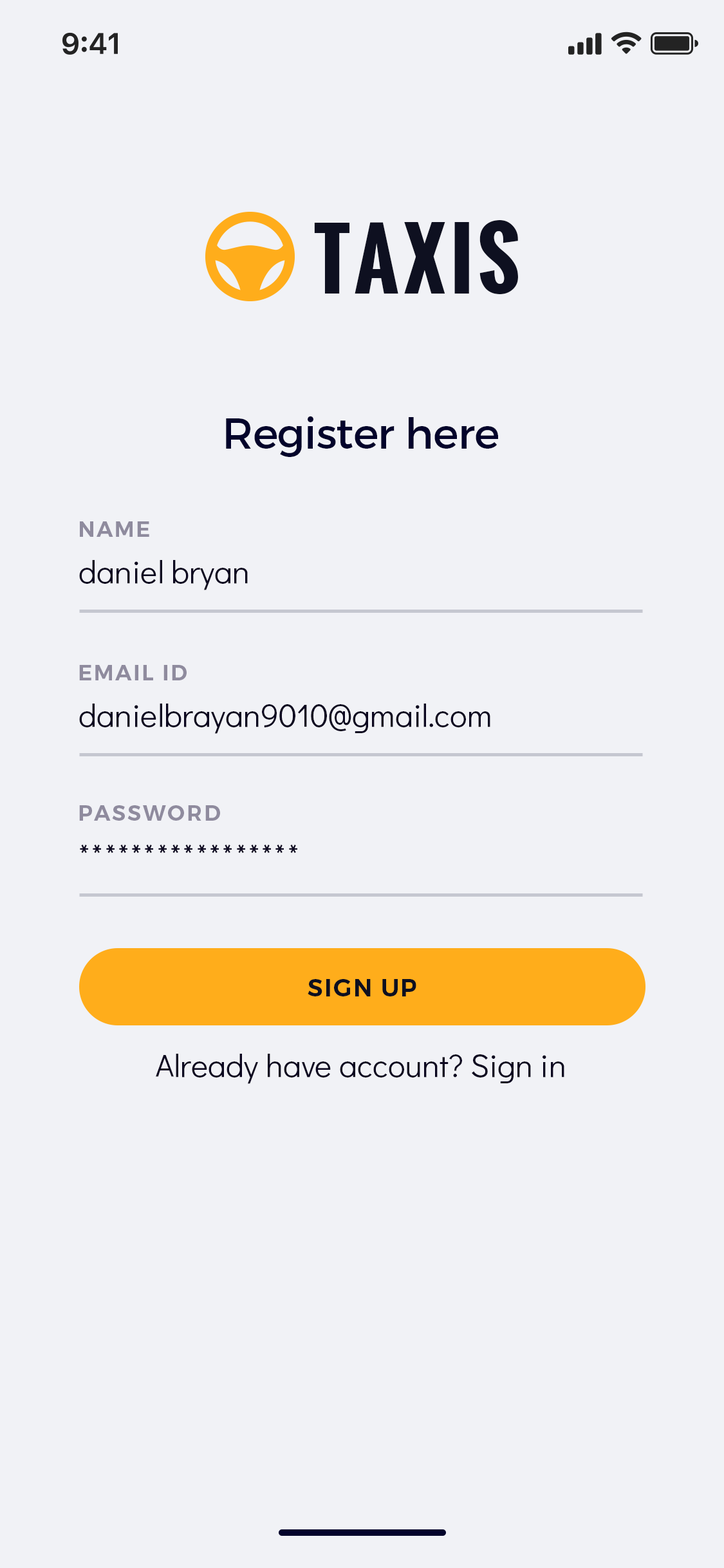
<style>
.page{position:relative;width:724px;height:1568px;background:#f1f2f6}
.page>*{position:absolute;margin:0}
.t1{font:80.5px "Oswald-Bold";letter-spacing:0.06em;color:#0e1020;text-transform:uppercase}
.t2{font:42.9px "Montserrat-Regular";letter-spacing:-0.01em;color:#03032b}
.t3{font:21.5px "Montserrat-SemiBold";letter-spacing:0.08em;color:#8f8b9e;text-transform:uppercase}
.t4{font:32.2px "DidactGothic-Regular";color:#0c0720}
.t5{font:32.2px "DidactGothic-Regular";letter-spacing:0.05em;color:#0c0720}
.t6{font:24.1px "Montserrat-SemiBold";letter-spacing:0.06em;color:#0e1020;text-transform:uppercase}
</style>
<div class="page">
<p class="t1" style="left:314px;top:220px;width:204px;height:74px">TAXIS</p>
<p class="t2" style="left:226px;top:416px;width:272px;height:41px">Register here</p>
<p class="t3" style="left:80px;top:521px;width:69px;height:16px">NAME</p>
<p class="t4" style="left:79px;top:560px;width:169px;height:30px">daniel bryan</p>
<p class="t3" style="left:79px;top:665px;width:108px;height:15px">Email id</p>
<p class="t4" style="left:79px;top:704px;width:411px;height:30px">danielbrayan9010@gmail.com</p>
<p class="t3" style="left:79px;top:805px;width:141px;height:16px">PASSWORD</p>
<p class="t5" style="left:80px;top:845px;width:217px;height:9px">*****************</p>
<p class="t6" style="left:308px;top:979px;width:108px;height:17px">SIGN UP</p>
<p class="t4" style="left:156px;top:1054px;width:409px;height:30px">Already have account? Sign in</p>
</div>
